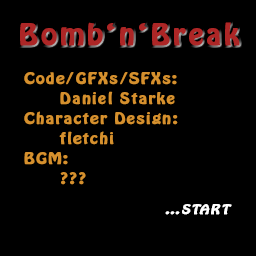
<style>
.page{position:relative;width:256px;height:256px;background:#000000}
.page>*{position:absolute;margin:0}
.t1{font:26px "HoboStd";letter-spacing:0.08em;color:#ad2626;font-weight:bold;scale:1.11 1}
.t2{font:14px/20px "HoboStd";letter-spacing:0.08em;color:#d5902e;font-weight:bold;scale:1.11 1}
.t3{font:12px "HoboStd";letter-spacing:0.08em;color:#ffffff;font-weight:bold;font-style:italic;scale:1.11 1}
</style>
<div class="page">
<p class="t1" style="left:20px;top:22px;width:220px;height:24px">Bomb‘n‘Break</p>
<p class="t2" style="left:24px;top:72px;width:154px;height:113px">Code/GFXs/SFXs:<br> Daniel Starke<br>Character Design:<br> fletchi<br>BGM:<br> ???</p>
<p class="t3" style="left:165px;top:204px;width:67px;height:11px">...START</p>
</div>
